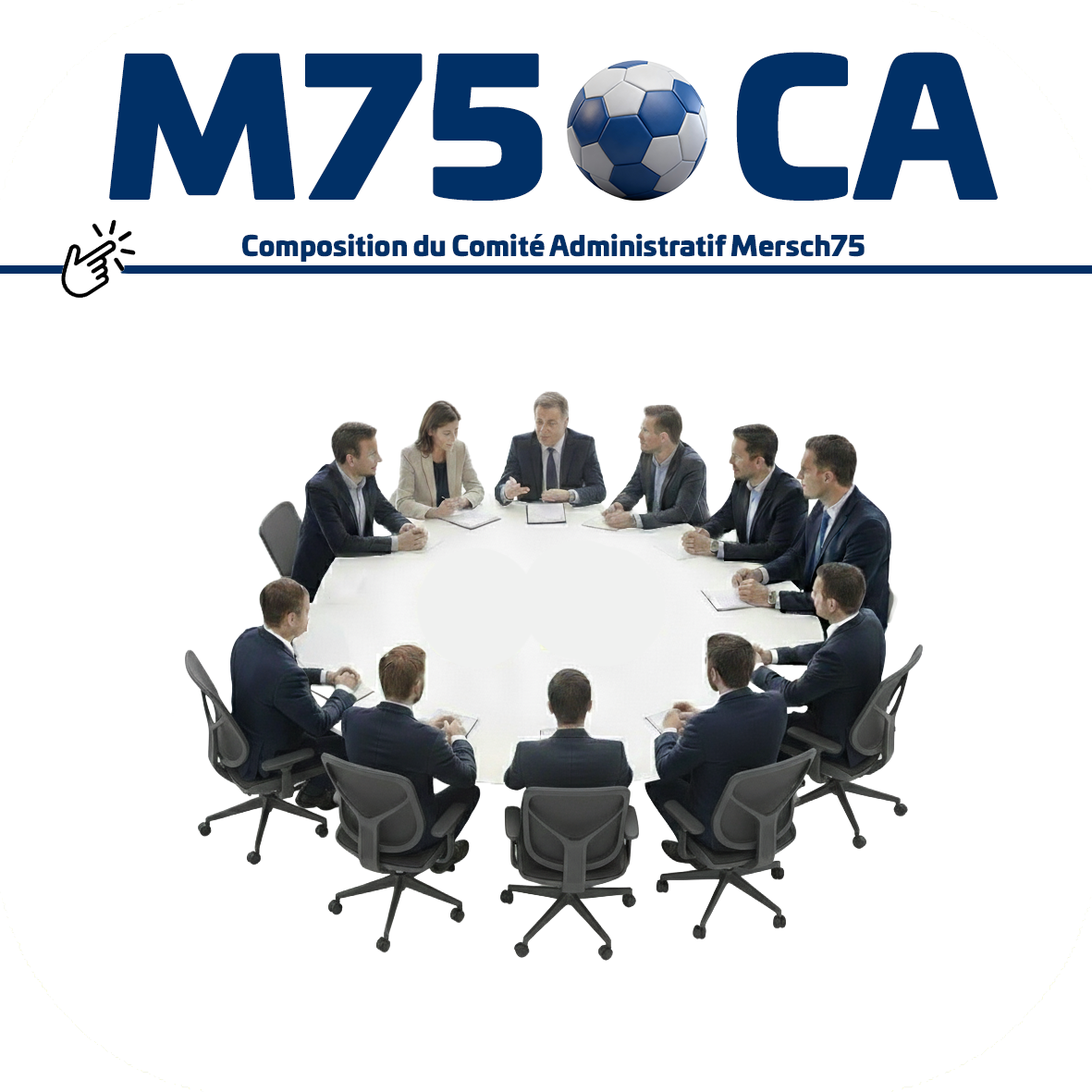
<style>
.page{position:relative;width:1092px;height:1092px;background:#ffffff}
.page>*{position:absolute;margin:0}
.t1{font:184.9px "UniviaProUltra";color:#013066;scale:1.05 1}
.t2{font:27px "UniviaProUltra";color:#013066}
</style>
<div class="page">
<p class="t1" style="left:109px;top:52px;width:889px;height:149px">M75     CA</p>
<p class="t2" style="left:242px;top:233px;width:623px;height:29px">Composition du Comité Administratif Mersch75</p>
</div>
